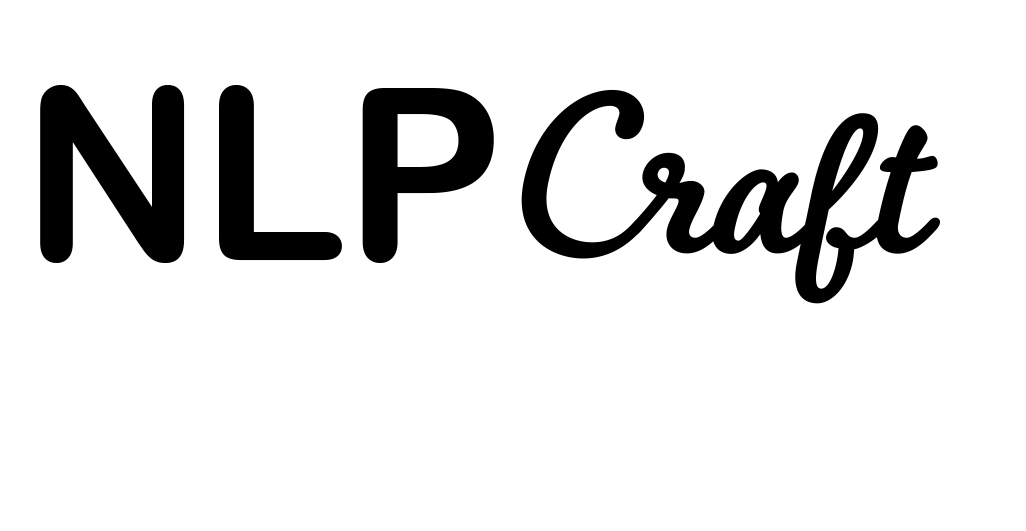
<style>
.page{position:relative;width:1026px;height:531px;background:#ffffff}
.page>*{position:absolute;margin:0}
.t1{font:240px "ArialRoundedMTBold";letter-spacing:-0.01em;color:#000000}
.t2{font:240px "BoucherieCursive-Bold";color:#000000;font-style:italic}
</style>
<div class="page">
<p class="t1" style="left:40px;top:85px;width:454px;height:178px">NLP</p>
<p class="t2" style="left:521px;top:89px;width:419px;height:215px">Craft</p>
</div>
